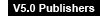
<style>
.page{position:relative;width:100px;height:16px;background:#000000}
.page>*{position:absolute;margin:0}
.t1{font:11px "Arial-BoldMT";color:#ffffff}
</style>
<div class="page">
<p class="t1" style="left:13px;top:4px;width:82px;height:8px">V5.0 Publishers</p>
</div>
